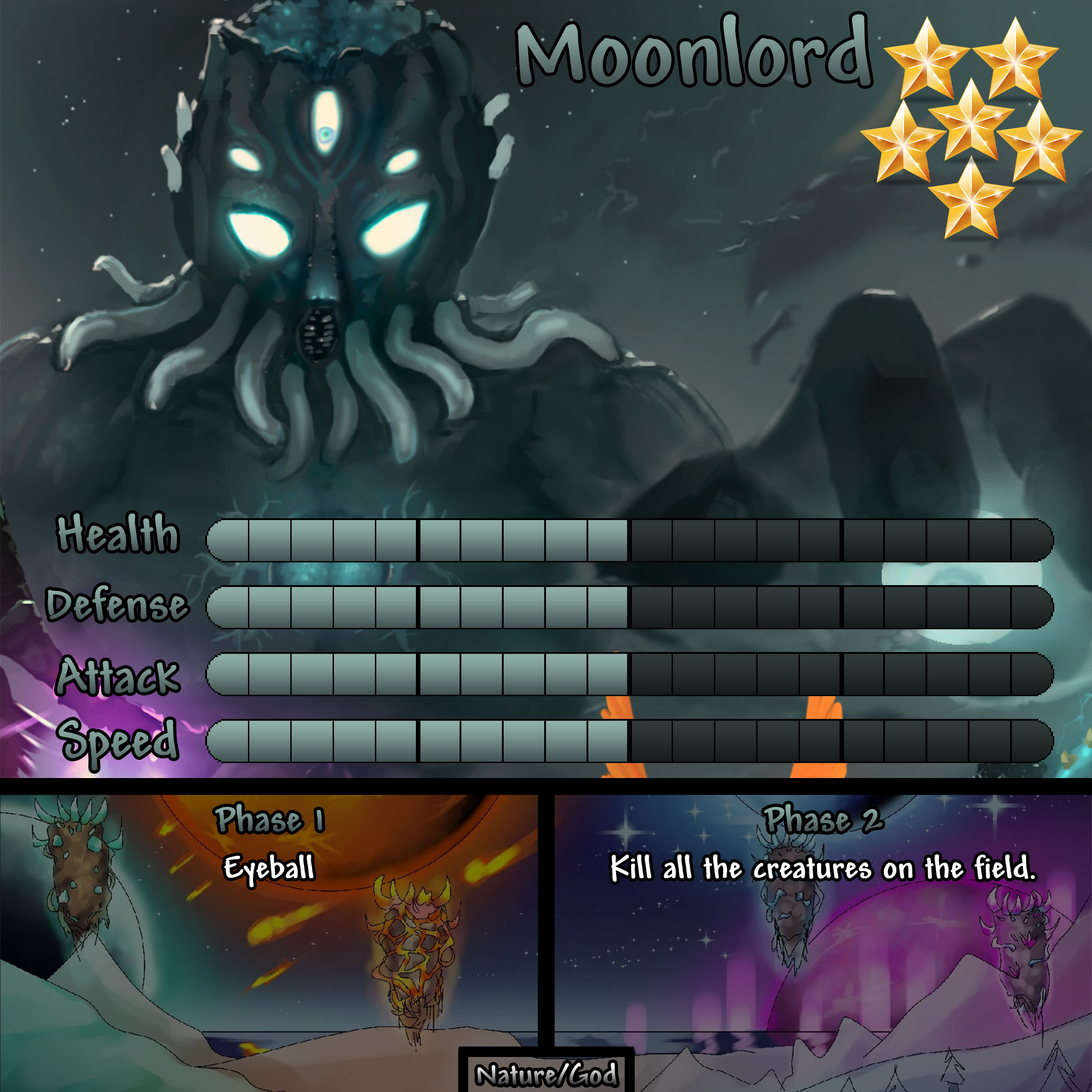
<style>
.page{position:relative;width:1092px;height:1092px}
.page>*{position:absolute;margin:0}
.t1{font:99.6px "Andy-Bold"}
.t2{font:53.2px "Andy-Bold"}
.t3{font:49.1px "Andy-Bold"}
.t4{font:39.1px "Andy-Bold"}
.t5{font:34.1px "Andy-Bold";color:#ffffff}
.t6{font:30.9px "Andy-Bold"}
</style>
<div class="page">
<p class="t1" style="left:517px;top:14px;width:354px;height:72px">Moonlord</p>
<p class="t2" style="left:58px;top:513px;width:119px;height:38px">Health</p>
<p class="t3" style="left:48px;top:585px;width:139px;height:36px">Defense</p>
<p class="t2" style="left:57px;top:657px;width:121px;height:37px">Attack</p>
<p class="t2" style="left:59px;top:719px;width:118px;height:52px">Speed</p>
<p class="t4" style="left:215px;top:804px;width:108px;height:28px">Phase 1</p>
<p class="t4" style="left:764px;top:804px;width:118px;height:28px">Phase 2</p>
<p class="t5" style="left:224px;top:854px;width:89px;height:33px">Eyeball</p>
<p class="t5" style="left:611px;top:854px;width:424px;height:28px">Kill all the creatures on the field.</p>
<p class="t6" style="left:477px;top:1062px;width:140px;height:23px">Nature/God</p>
</div>
